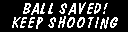
<style>
.page{position:relative;width:128px;height:32px;background:#000000}
.page>*{position:absolute;margin:0}
.t1{font:16.4px "DomDiagonalBT-Regular";letter-spacing:0.075em;color:#ffffff}
</style>
<div class="page">
<p class="t1" style="left:23px;top:2px;width:85px;height:13px">BALL SAVED!</p>
<p class="t1" style="left:12px;top:16px;width:106px;height:13px">KEEP SHOOTING</p>
</div>
